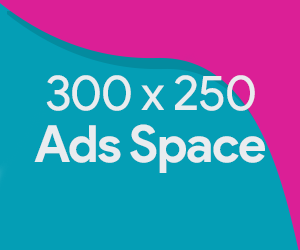
<style>
.page{position:relative;width:300px;height:250px;background:#049eb5}
.page>*{position:absolute;margin:0}
.t1{font:49.9px "ProductSans-Regular";letter-spacing:-0.025em;color:#e9ecef}
.t2{font:51.3px "ProductSans-Bold";letter-spacing:-0.025em;color:#e9ecef}
</style>
<div class="page">
<p class="t1" style="left:46px;top:75px;width:209px;height:36px">300 x 250</p>
<p class="t2" style="left:34px;top:124px;width:231px;height:49px">Ads Space</p>
</div>
